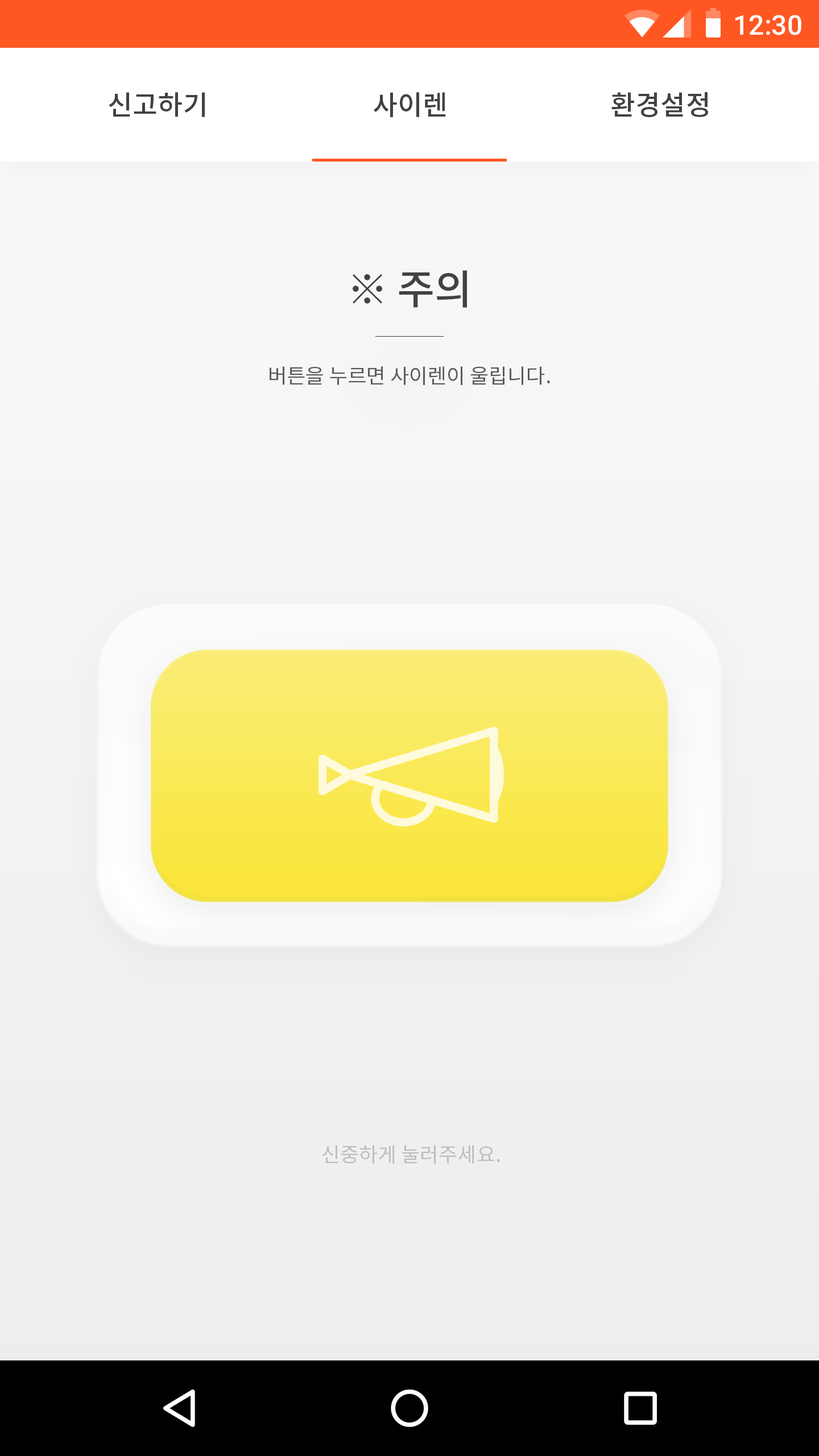
<style>
.page{position:relative;width:819px;height:1456px}
.page>*{position:absolute;margin:0}
.t1{font:27.3px "Roboto-Medium";color:#ffffff}
.t2{font:27.3px "NotoSansCJKkr-Medium";color:#424242}
.t3{font:40.9px "NotoSansCJKkr-Medium";color:#424242}
.t4{font:20.5px "NotoSansCJKkr-Regular";color:#5b5b5b}
.t5{font:20.5px "NotoSansCJKkr-Regular";color:#bdbdbd}
</style>
<div class="page">
<p class="t1" style="left:735px;top:15px;width:66px;height:20px">12:30</p>
<p class="t2" style="left:109px;top:92px;width:96px;height:25px">신고하기</p>
<p class="t2" style="left:374px;top:92px;width:72px;height:25px">사이렌</p>
<p class="t2" style="left:611px;top:92px;width:97px;height:25px">환경설정</p>
<p class="t3" style="left:353px;top:270px;width:114px;height:38px">※ 주의</p>
<p class="t4" style="left:270px;top:366px;width:280px;height:19px">버튼을 누르면 사이렌이 울립니다.</p>
<p class="t5" style="left:322px;top:1145px;width:178px;height:19px">신중하게 눌러주세요.</p>
</div>
